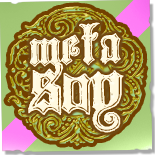
<style>
.page{position:relative;width:155px;height:155px}
.page>*{position:absolute;margin:0}
.t1{font:64.8px/48.6px "Monarchia";letter-spacing:-0.05em;color:#fff9e0}
.t2{font:64.8px "Monarchia";letter-spacing:-0.05em;color:#fff9e0}
.t3{font:97.2px/48.6px "Monarchia";letter-spacing:-0.05em;color:#fff9e0}
</style>
<div class="page">
<p class="t1" style="left:28px;top:22px;width:96px;height:111px;text-align:center;rotate:-1deg"><span class="t2">m</span>eta<br><span class="t3">soy</span></p>
</div>
